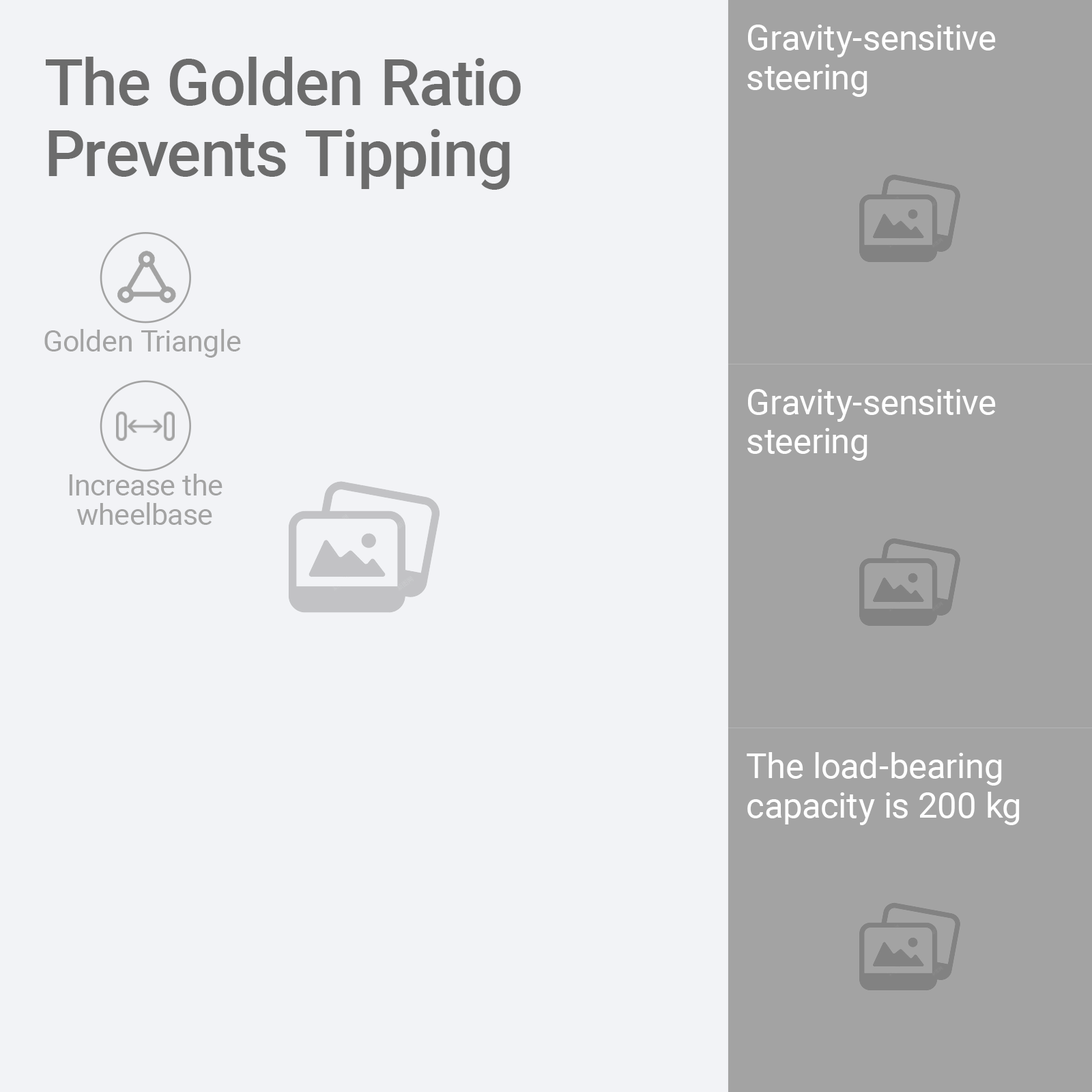
<style>
.page{position:relative;width:1092px;height:1092px;background:#f2f3f6}
.page>*{position:absolute;margin:0}
.t1{font:34.9px/39.3px "Roboto-Regular";color:#ffffff}
.t2{font:64.1px/71px "Roboto-Medium";color:#6c6c6c}
.t3{font:29.1px "Roboto-Regular";color:#a3a3a3}
.t4{font:29.1px/29.1px "Roboto-Regular";color:#a3a3a3}
</style>
<div class="page">
<p class="t1" style="left:747px;top:25px;width:249px;height:72px">Gravity-sensitive <br>steering</p>
<p class="t2" style="left:46px;top:57px;width:475px;height:133px">The Golden Ratio <br>Prevents Tipping</p>
<p class="t3" style="left:44px;top:329px;width:197px;height:29px">Golden Triangle</p>
<p class="t1" style="left:747px;top:389px;width:249px;height:72px">Gravity-sensitive <br>steering</p>
<p class="t4" style="left:69px;top:474px;width:153px;height:51px;text-align:center">Increase the<br>wheelbase</p>
<p class="t1" style="left:747px;top:752px;width:273px;height:73px">The load-bearing <br>capacity is 200 kg</p>
</div>
